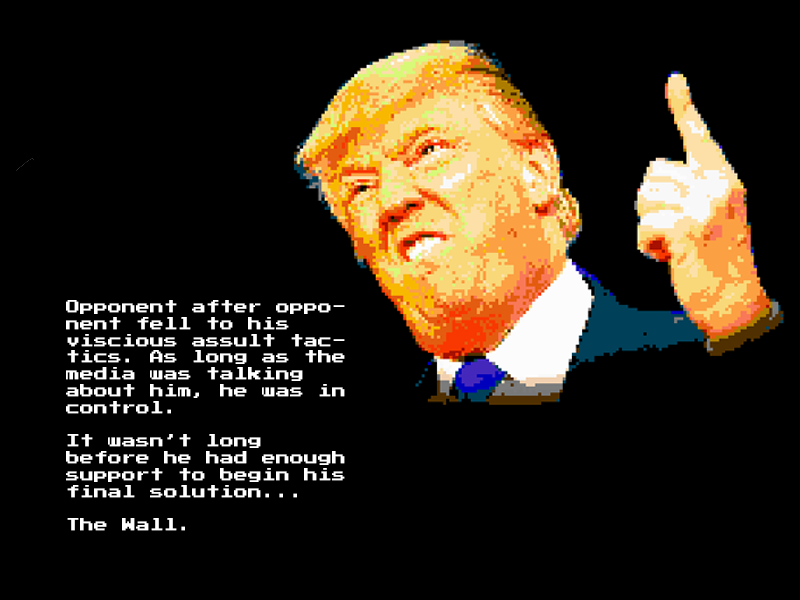
<style>
.page{position:relative;width:800px;height:600px;background:#000000}
.page>*{position:absolute;margin:0}
.t1{font:14px "PressStart2P";color:#ffffff}
</style>
<div class="page">
<p class="t1" style="left:66px;top:300px;width:279px;height:231px">Opponent after opponent fell to his viscious assult tactics. As long as the media was talking about him, he was in control.<br><br>It wasn’t long before he had enough support to begin his final solution...<br><br>The Wall.</p>
</div>
